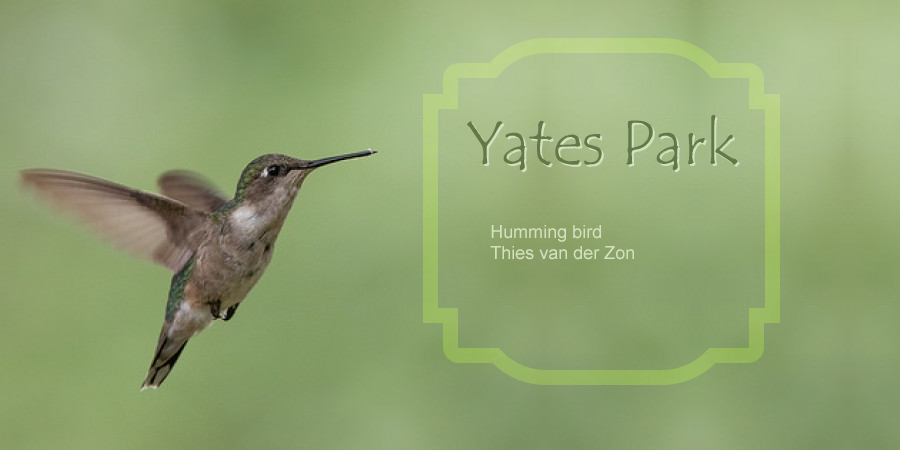
<style>
.page{position:relative;width:900px;height:450px}
.page>*{position:absolute;margin:0}
.t1{font:64.1px "TempusSansITC";color:#627847}
.t2{font:18px "ArialMT";color:#d2e2bf}
</style>
<div class="page">
<p class="t1" style="left:467px;top:114px;width:271px;height:57px">Yates Park</p>
<p class="t2" style="left:490px;top:225px;width:144px;height:35px">Humming bird <br>Thies van der Zon</p>
</div>
